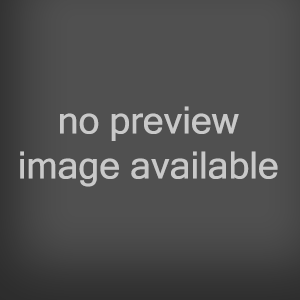
<style>
.page{position:relative;width:300px;height:300px;background:#505050}
.page>*{position:absolute;margin:0}
.t1{font:37.5px "MicrosoftSansSerif";color:#c9c9c9}
</style>
<div class="page">
<p class="t1" style="left:20px;top:106px;width:258px;height:81px;text-align:center">no preview<br>image available</p>
</div>
